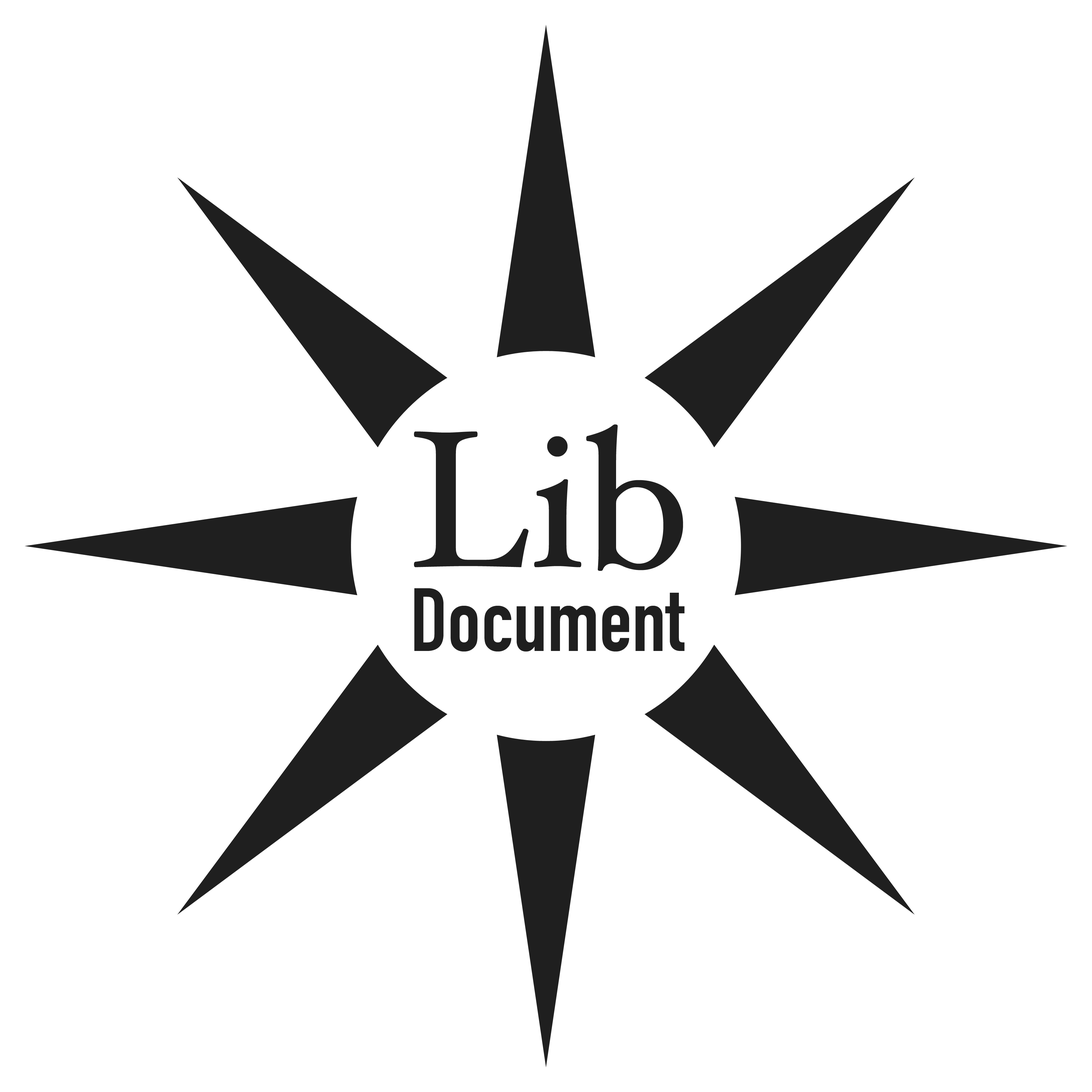
<style>
.page{position:relative;width:1092px;height:1092px;background:#ffffff}
.page>*{position:absolute;margin:0}
.t1{font:195.2px "HoeflerText-Regular";color:#1f1f1f}
.t2{font:88.1px "DINCondensed-Bold";color:#1f1f1f}
</style>
<div class="page">
<p class="t1" style="left:414px;top:424px;width:269px;height:147px">Lib</p>
<p class="t2" style="left:414px;top:588px;width:271px;height:64px">Document</p>
</div>
